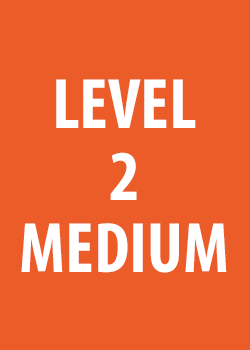
<style>
.page{position:relative;width:250px;height:350px;background:#ec5c28}
.page>*{position:absolute;margin:0}
.t1{font:72px/72px "MyriadPro-BoldCond";color:#ffffff}
</style>
<div class="page">
<p class="t1" style="left:21px;top:79px;width:206px;height:194px;text-align:center">LEVEL<br>2<br>MEDIUM</p>
</div>
